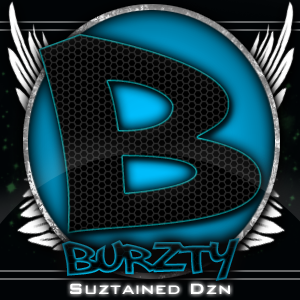
<style>
.page{position:relative;width:300px;height:300px}
.page>*{position:absolute;margin:0}
.t1{font:370px "PhillySans";color:#000000}
.t2{font:65px "PhillySans"}
.t3{font:20px "BankGothicBT-Medium";color:#ffffff}
</style>
<div class="page">
<p class="t1" style="left:38px;top:34px;width:224px;height:200px">b</p>
<p class="t2" style="left:61px;top:238px;width:179px;height:43px">burzty</p>
<p class="t3" style="left:70px;top:283px;width:160px;height:11px">Suztained Dzn</p>
</div>
